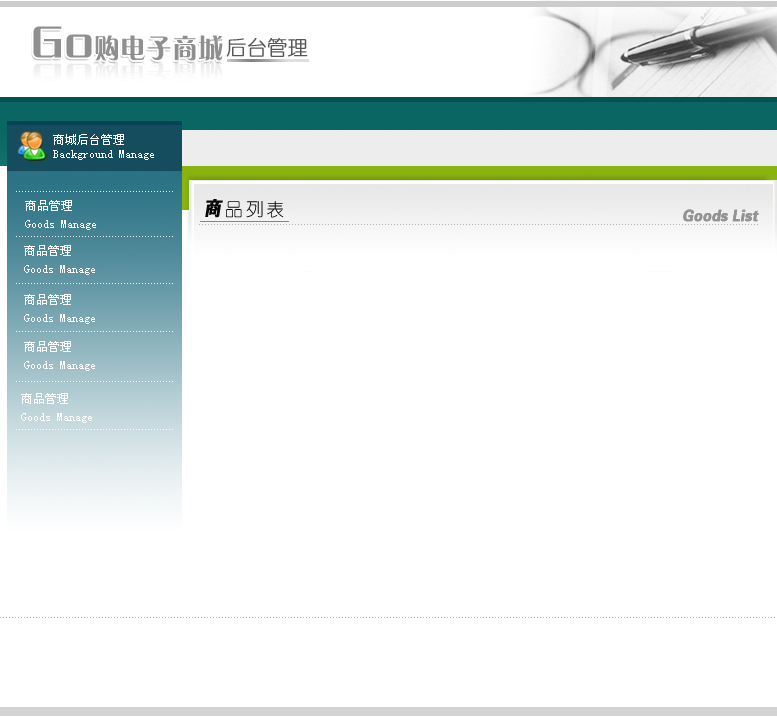
<style>
.page{position:relative;width:777px;height:717px;background:#ffffff}
.page>*{position:absolute;margin:0}
.t1{font:26.7px "FZCQJW--GB1-0";letter-spacing:0.05em;color:#8f8f8f;scale:0.93 1}
.t2{font:48px "FZCQJW--GB1-0";letter-spacing:0.05em;color:#8f8f8f;scale:0.93 1}
.t3{font:20px "YouYuan";color:#575757;font-weight:bold}
.t4{font:21.2px "FZCQJW--GB1-0";letter-spacing:0.05em;color:#f3f3f3;scale:1.17 1}
.t5{font:38.1px "FZCQJW--GB1-0";letter-spacing:0.05em;color:#f3f3f3;scale:1.17 1}
.t6{font:12px "SimSun";color:#ffffff}
.t7{font:12px/18px "SimSun";color:#ffffff}
.t8{font:18px "YouYuan";letter-spacing:0.15em;color:#080808}
.t9{font:19.8px "FZDHTJW--GB1-0";color:#080808;font-weight:bold;font-style:italic;scale:0.91 1}
.t10{font:15.4px "FZDHTJW--GB1-0";color:#939393;font-weight:bold;font-style:italic;scale:0.91 1}
</style>
<div class="page">
<p class="t1" style="left:33px;top:26px;width:190px;height:35px"><span class="t2">Go</span>购电子商城</p>
<p class="t3" style="left:226px;top:38px;width:82px;height:19px">后台管理</p>
<p class="t4" style="left:33px;top:61px;width:190px;height:28px"><span class="t5">Go</span>购电子商城</p>
<p class="t6" style="left:53px;top:134px;width:101px;height:26px">商城后台管理<br>Background Manage</p>
<p class="t7" style="left:25px;top:200px;width:71px;height:30px">商品管理<br>Goods Manage</p>
<p class="t8" style="left:205px;top:199px;width:79px;height:19px"><span class="t9">商</span>品列表</p>
<p class="t10" style="left:683px;top:209px;width:76px;height:13px">Goods List</p>
<p class="t7" style="left:24px;top:245px;width:71px;height:30px">商品管理<br>Goods Manage</p>
<p class="t7" style="left:24px;top:294px;width:71px;height:30px">商品管理<br>Goods Manage</p>
<p class="t7" style="left:24px;top:341px;width:71px;height:30px">商品管理<br>Goods Manage</p>
<p class="t7" style="left:21px;top:393px;width:71px;height:30px">商品管理<br>Goods Manage</p>
</div>
